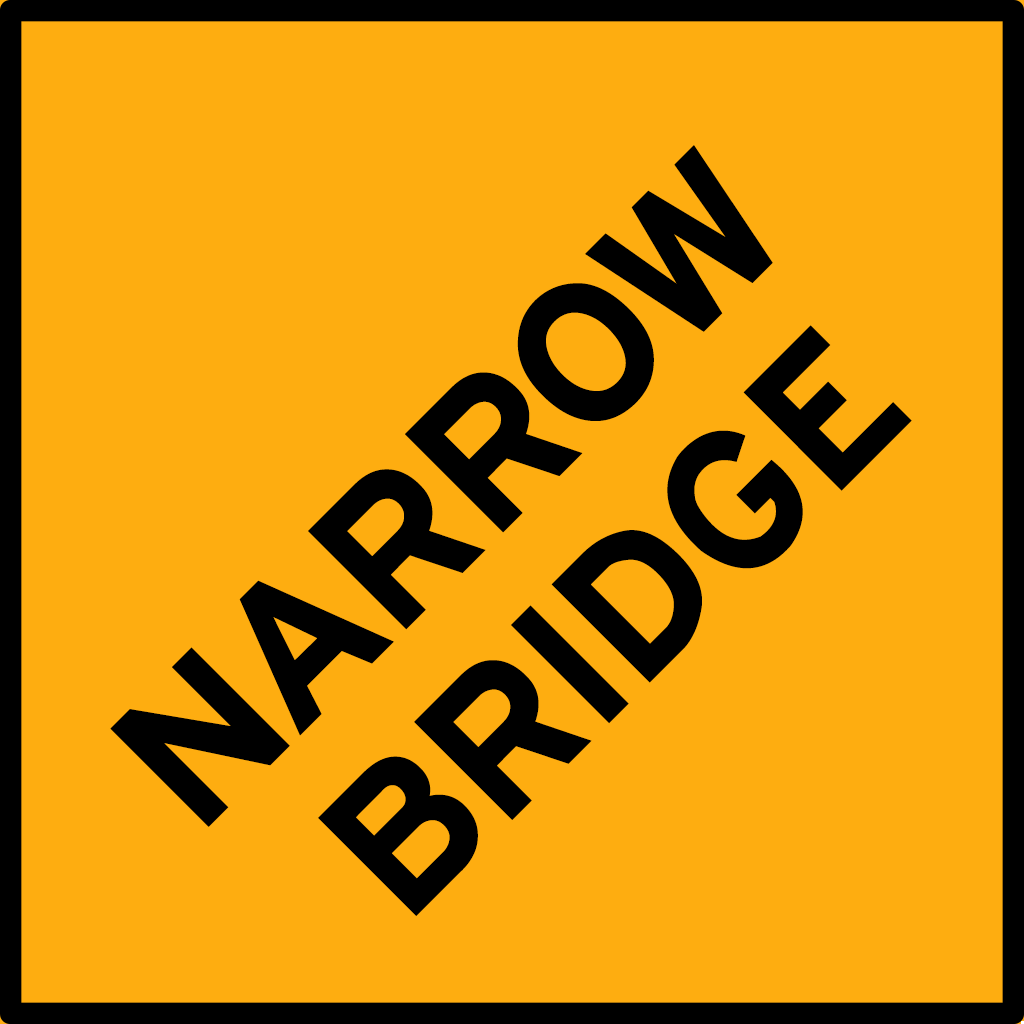
<style>
.page{position:relative;width:1024px;height:1024px;background:#fead10}
.page>*{position:absolute;margin:0}
.t1{font:210px/210px "HittheRoad";color:#000000}
</style>
<div class="page">
<p class="t1" style="left:110px;top:145px;width:802px;height:771px;text-align:center;rotate:-45deg">NARROW <br>BRIDGE</p>
</div>
